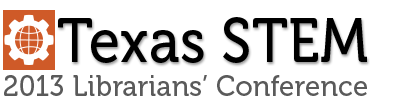
<style>
.page{position:relative;width:409px;height:109px;background:#ffffff}
.page>*{position:absolute;margin:0}
.t1{font:61.6px "Museo-500";letter-spacing:0.01em;color:#000000;scale:0.91 1}
.t2{font:29.4px "Museo-500";letter-spacing:0.01em;color:#595959;scale:0.94 1}
</style>
<div class="page">
<p class="t1" style="left:58px;top:17px;width:309px;height:46px">Texas STEM</p>
<p class="t2" style="left:4px;top:75px;width:363px;height:21px">2013 Librarians’ Conference</p>
</div>
